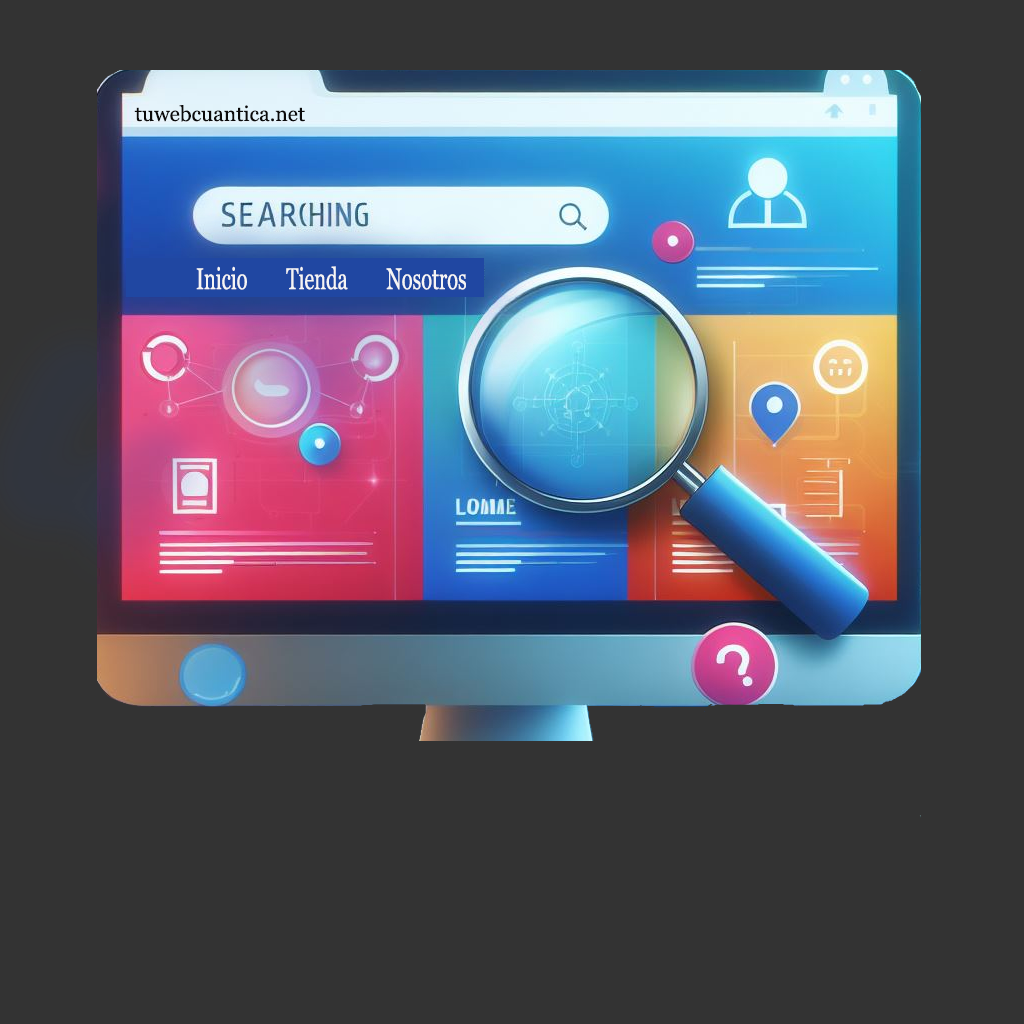
<style>
.page{position:relative;width:1024px;height:1024px;background:#333333}
.page>*{position:absolute;margin:0}
.t1{font:21px "Georgia";color:#0b0a0a}
.t2{font:30px "Georgia";color:#f5f5f5;scale:0.67 1}
</style>
<div class="page">
<p class="t1" style="left:134px;top:105px;width:171px;height:17px">tuwebcuantica.net</p>
<p class="t2" style="left:196px;top:266px;width:270px;height:24px">Inicio        Tienda        Nosotros</p>
</div>
